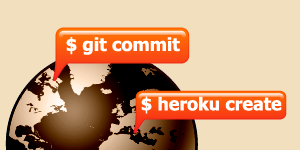
<style>
.page{position:relative;width:300px;height:150px;background:#f1dfbe}
.page>*{position:absolute;margin:0}
.t1{font:18px "Tahoma-Bold";color:#ffffff}
.t2{font:17.8px "Tahoma-Bold";color:#ffffff}
</style>
<div class="page">
<p class="t1" style="left:66px;top:37px;width:114px;height:18px">$ git commit</p>
<p class="t2" style="left:141px;top:96px;width:141px;height:18px">$ heroku create</p>
</div>
